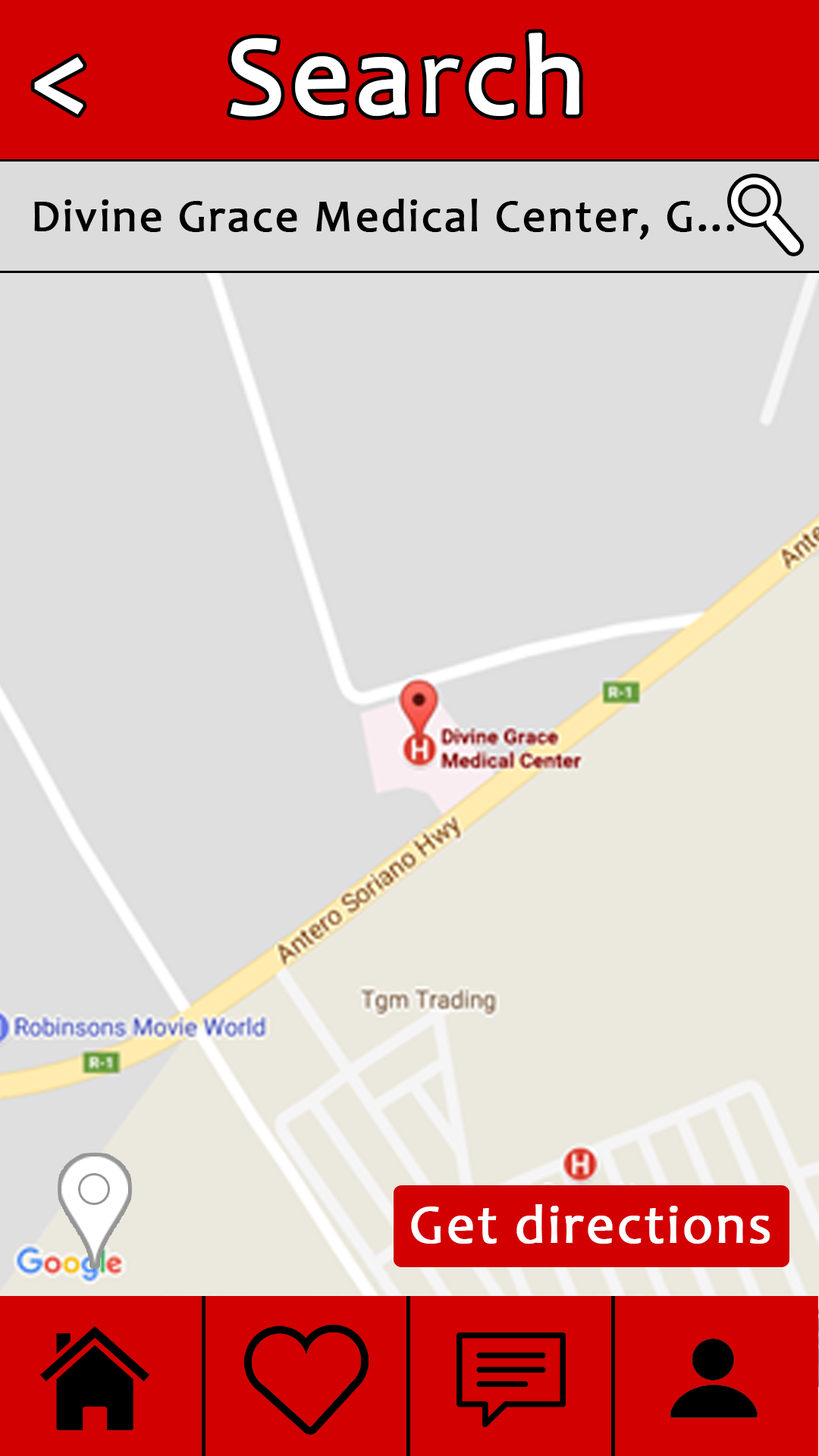
<style>
.page{position:relative;width:819px;height:1456px;background:#dfdfdf}
.page>*{position:absolute;margin:0}
.t1{font:113.4px "Candara";letter-spacing:0.03em;color:#ffffff;font-weight:bold}
.t2{font:113.7px "Candara";letter-spacing:0.03em;color:#ffffff;font-weight:bold}
.t3{font:45.5px "Candara";letter-spacing:0.03em;color:#000000;font-weight:bold}
.t4{font:54.6px "Candara";letter-spacing:0.03em;color:#ffffff;font-weight:bold}
</style>
<div class="page">
<p class="t1" style="left:230px;top:33px;width:349px;height:84px">Search</p>
<p class="t2" style="left:34px;top:57px;width:49px;height:58px">&lt;</p>
<p class="t3" style="left:34px;top:199px;width:701px;height:41px">Divine Grace Medical Center, G...</p>
<p class="t4" style="left:411px;top:1204px;width:359px;height:40px">Get directions</p>
</div>
